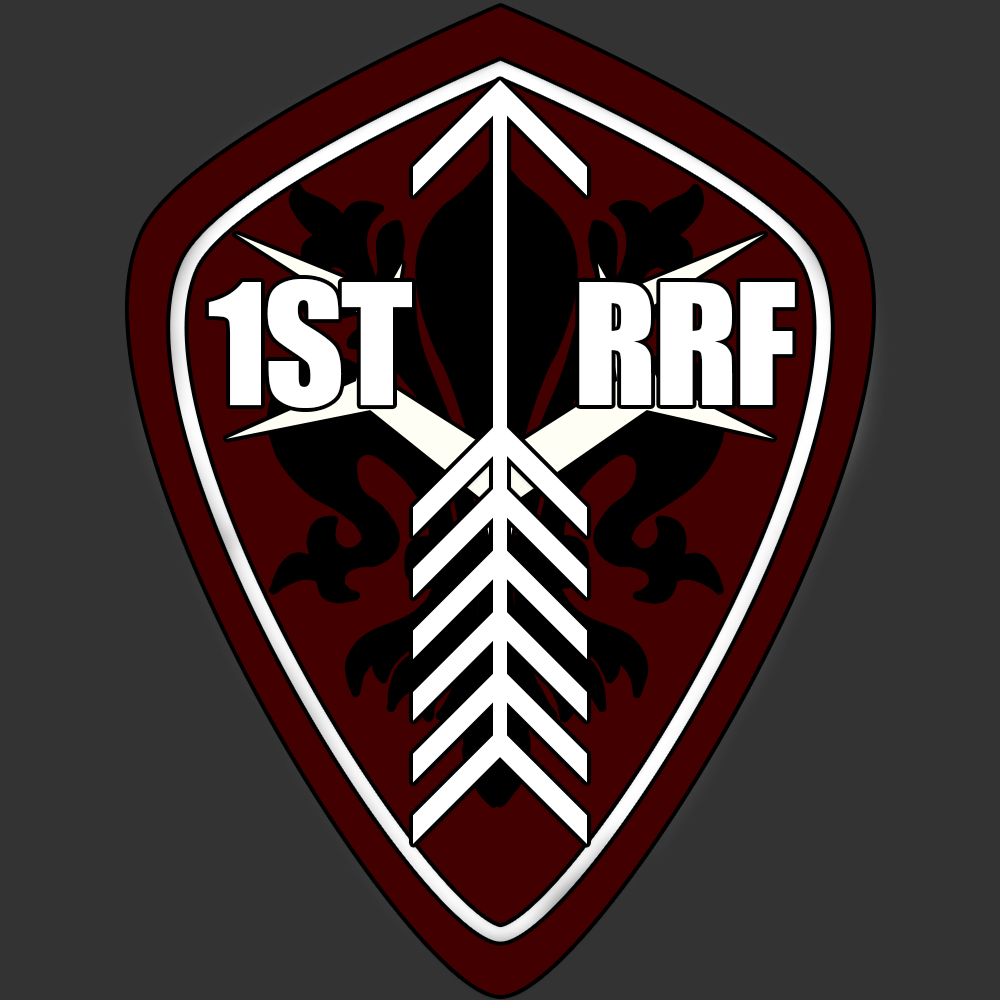
<style>
.page{position:relative;width:1000px;height:1000px;background:#333333}
.page>*{position:absolute;margin:0}
.t1{font:155.6px "Impact";letter-spacing:-0.02em;color:#ffffff}
</style>
<div class="page">
<p class="t1" style="left:208px;top:279px;width:204px;height:129px">1ST</p>
<p class="t1" style="left:579px;top:282px;width:216px;height:123px">RRF</p>
</div>
